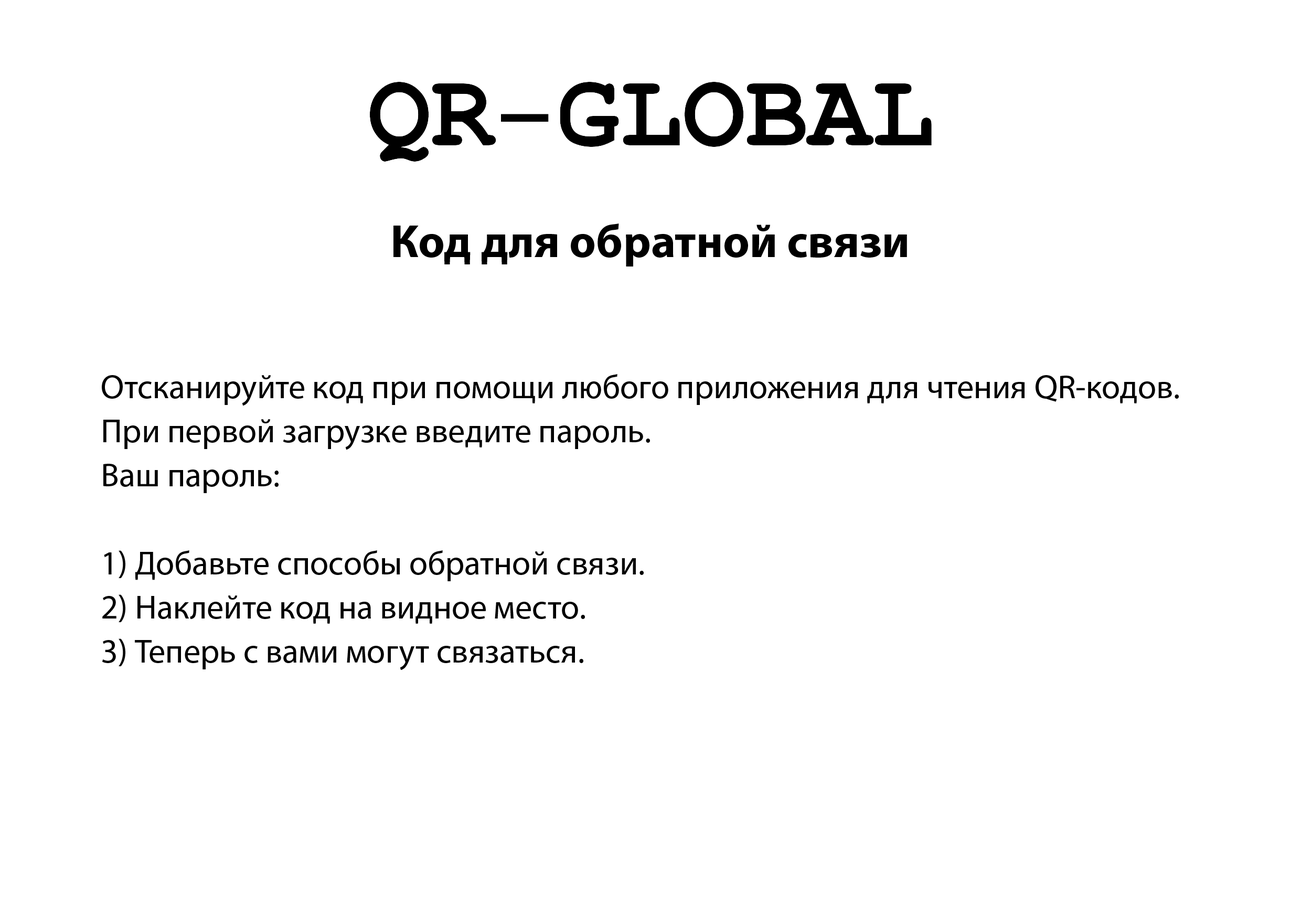
<style>
.page{position:relative;width:1301px;height:917px;background:#ffffff}
.page>*{position:absolute;margin:0}
.t1{font:116.4px "MyriadPro-Regular";color:#000000;scale:1.65 1}
.t2{font:46.8px "MyriadPro-Bold";color:#000000}
.t3{font:33.6px/44.1px "MyriadPro-Regular";color:#000000}
</style>
<div class="page">
<p class="t1" style="left:501px;top:114px;width:48px;height:8px">-</p>
<p class="t2" style="left:393px;top:223px;width:514px;height:43px">Код для обратной связи</p>
<p class="t3" style="left:102px;top:374px;width:1076px;height:296px">Отсканируйте код при помощи любого приложения для чтения QR-кодов. <br>При первой загрузке введите пароль. <br>Ваш пароль: <br><br>1) Добавьте способы обратной связи.<br>2) Наклейте код на видное место.<br>3) Теперь с вами могут связаться.</p>
</div>
